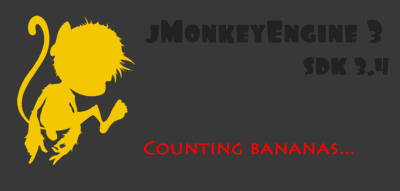
<style>
.page{position:relative;width:400px;height:191px;background:#383838}
.page>*{position:absolute;margin:0}
.t1{font:32px "Foo-Regular";color:#222222}
.t2{font:24px "Foo-Regular";color:#222222;font-weight:bold}
.t3{font:18px "LithosPro-Regular";color:#ff0000;font-weight:bold}
</style>
<div class="page">
<p class="t1" style="left:145px;top:19px;width:237px;height:25px">jMonkeyEngine 3</p>
<p class="t2" style="left:303px;top:57px;width:86px;height:19px">SDK 3.4</p>
<p class="t3" style="left:144px;top:141px;width:210px;height:14px">Counting bananas...</p>
</div>
